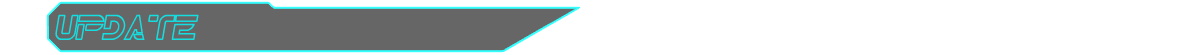
<style>
.page{position:relative;width:1200px;height:55px;background:#ffffff}
.page>*{position:absolute;margin:0}
.t1{font:36px "TRN";color:#14dee0;font-style:italic;scale:0.96 1}
</style>
<div class="page">
<p class="t1" style="left:55px;top:14px;width:144px;height:26px">update</p>
</div>
